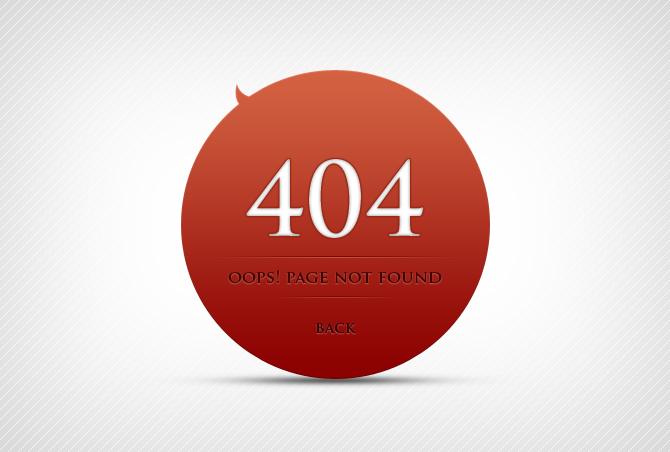
<style>
.page{position:relative;width:670px;height:452px}
.page>*{position:absolute;margin:0}
.t1{font:100px "TrajanPro-Bold";color:#ffffff}
.t2{font:17px "TrajanPro-Bold";color:#430400}
.t3{font:15px "TrajanPro-Bold";color:#2d0300}
</style>
<div class="page">
<p class="t1" style="left:246px;top:159px;width:178px;height:79px">404</p>
<p class="t2" style="left:228px;top:270px;width:214px;height:13px">oops! page not found</p>
<p class="t3" style="left:316px;top:323px;width:41px;height:10px">back</p>
</div>
